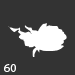
<style>
.page{position:relative;width:75px;height:75px;background:#333333}
.page>*{position:absolute;margin:0}
.t1{font:12px "MyriadPro-Regular";color:#ffffff}
</style>
<div class="page">
<p class="t1" style="left:4px;top:64px;width:12px;height:8px">60</p>
</div>
